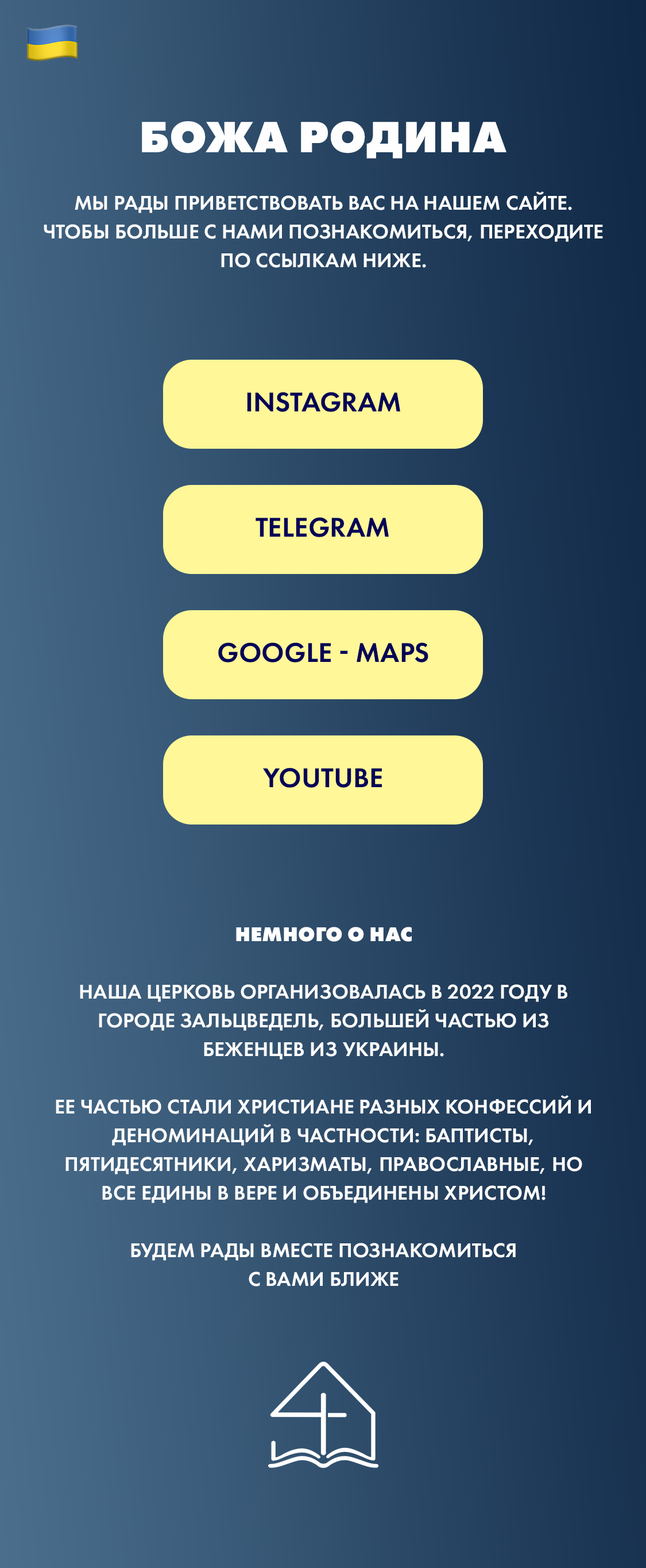
<style>
.page{position:relative;width:646px;height:1568px}
.page>*{position:absolute;margin:0}
.t1{font:45.5px "FuturaPT-ExtraBold";color:#fefefe;text-transform:uppercase}
.t2{font:20.7px/28.7px "FuturaPT-Demi";color:#fefefe;text-transform:uppercase}
.t3{font:28.2px "FuturaPT-Demi";color:#060357;text-transform:uppercase}
.t4{font:20.7px/28.7px "FuturaPT-ExtraBold";color:#fefefe;text-transform:uppercase}
</style>
<div class="page">
<p class="t1" style="left:142px;top:121px;width:365px;height:38px">Божа Родина</p>
<p class="t2" style="left:44px;top:191px;width:559px;height:77px;text-align:center">Мы рады приветствовать вас на нашем сайте.<br>Чтобы больше с нами познакомиться, переходите по ссылкам ниже.</p>
<p class="t3" style="left:247px;top:392px;width:153px;height:20px">Instagram</p>
<p class="t3" style="left:256px;top:517px;width:133px;height:20px">Telegram</p>
<p class="t3" style="left:218px;top:642px;width:211px;height:20px">Google - maps</p>
<p class="t3" style="left:263px;top:768px;width:119px;height:20px">Youtube</p>
<p class="t2" style="left:56px;top:927px;width:535px;height:359px;text-align:center"><span class="t4">Немного о нас<br></span><br>Наша церковь организовалась в 2022 году в городе Зальцведель, большей частью из беженцев из Украины. <br><br>Ее частью стали христиане разных конфессий и деноминаций в частности: баптисты, пятидесятники, харизматы, православные, но все едины в вере и объединены Христом!<br><br>Будем рады вместе познакомиться <br>с вами ближе</p>
</div>
